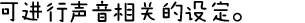
<style>
.page{position:relative;width:305px;height:23px;background:#ffffff}
.page>*{position:absolute;margin:0}
.t1{font:26px "¢è?";color:#000000}
</style>
<div class="page">
<p class="t1" style="left:0px;top:0px;width:242px;height:23px">可进行声音相关的设定。</p>
</div>
